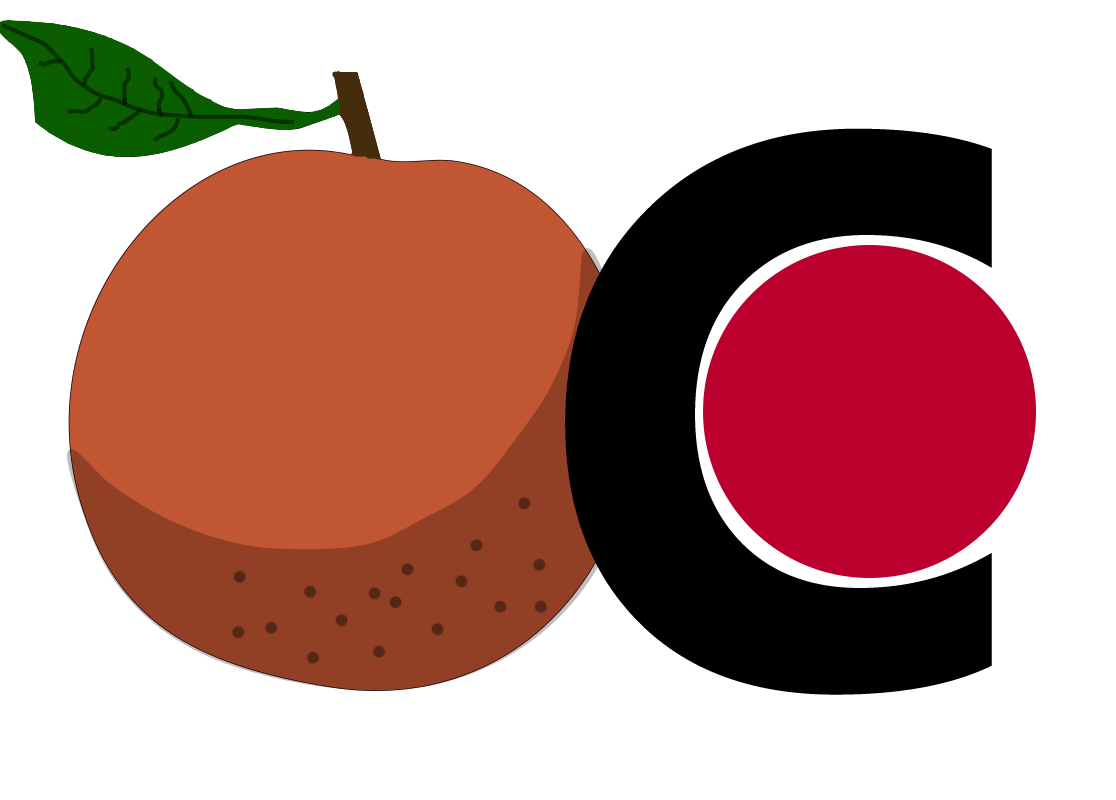
<style>
.page{position:relative;width:1116px;height:800px;background:#ffffff}
.page>*{position:absolute;margin:0}
.t1{font:781.2px "Gadugi-Bold";color:#000000}
</style>
<div class="page">
<p class="t1" style="left:565px;top:128px;width:427px;height:567px">C</p>
</div>
